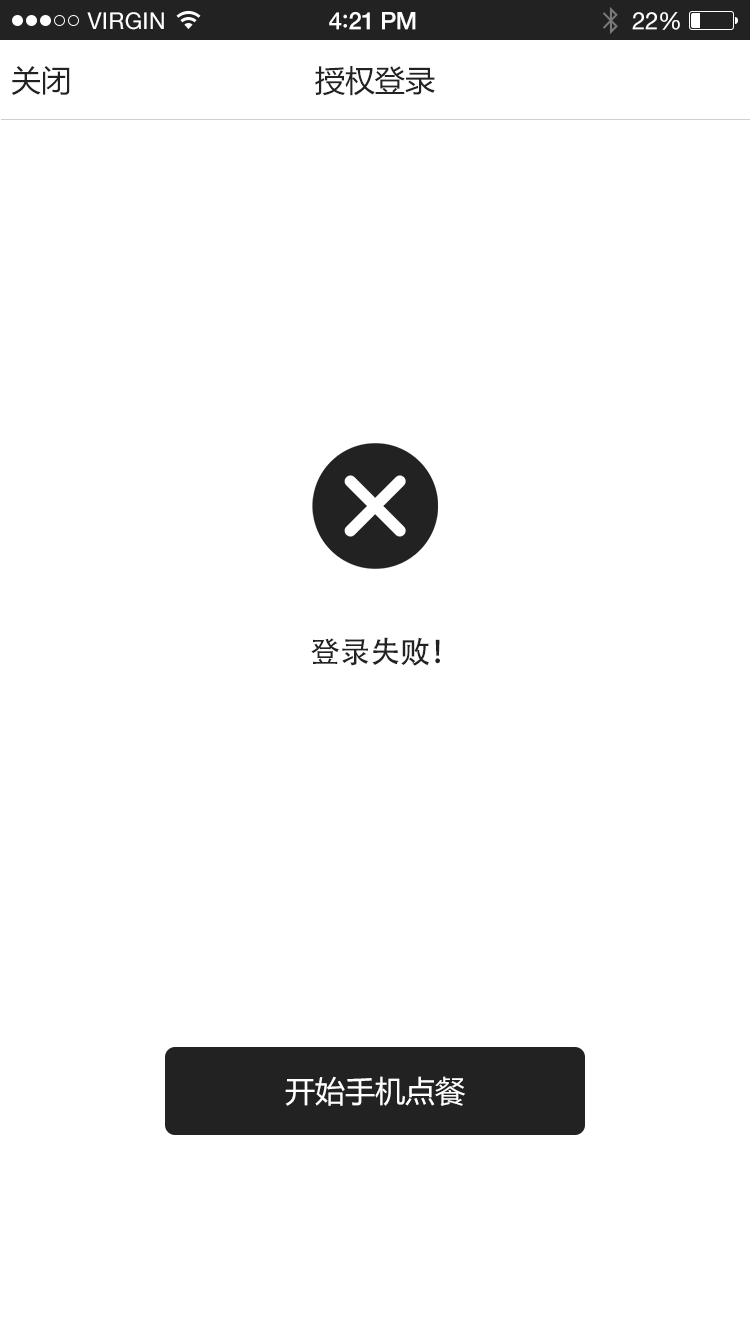
<style>
.page{position:relative;width:750px;height:1334px;background:#ffffff}
.page>*{position:absolute;margin:0}
.t1{font:23px "HelveticaNeue";letter-spacing:0.02em;color:#ffffff}
.t2{font:24px "HelveticaNeue-Medium";letter-spacing:-0.02em;color:#ffffff}
.t3{font:26px "Avenir-Medium";letter-spacing:-0.02em;color:#ffffff}
.t4{font:24px "HelveticaNeue";letter-spacing:-0.02em;color:#ffffff}
.t5{font:30px "MicrosoftYaHei";color:#222222}
.t6{font:30px "AdobeHeitiStd-Regular";color:#222222}
.t7{font:30px "MicrosoftYaHei";color:#ffffff}
</style>
<div class="page">
<p class="t1" style="left:87px;top:12px;width:77px;height:18px">VIRGIN</p>
<p class="t2" style="left:329px;top:12px;width:87px;height:18px">4<span class="t3">:</span>21 PM</p>
<p class="t4" style="left:632px;top:12px;width:48px;height:18px">22%</p>
<p class="t5" style="left:11px;top:66px;width:59px;height:29px">关闭</p>
<p class="t5" style="left:315px;top:66px;width:120px;height:30px">授权登录</p>
<p class="t6" style="left:311px;top:637px;width:129px;height:29px">登录失败！</p>
<p class="t7" style="left:285px;top:1076px;width:180px;height:30px">开始手机点餐</p>
</div>
